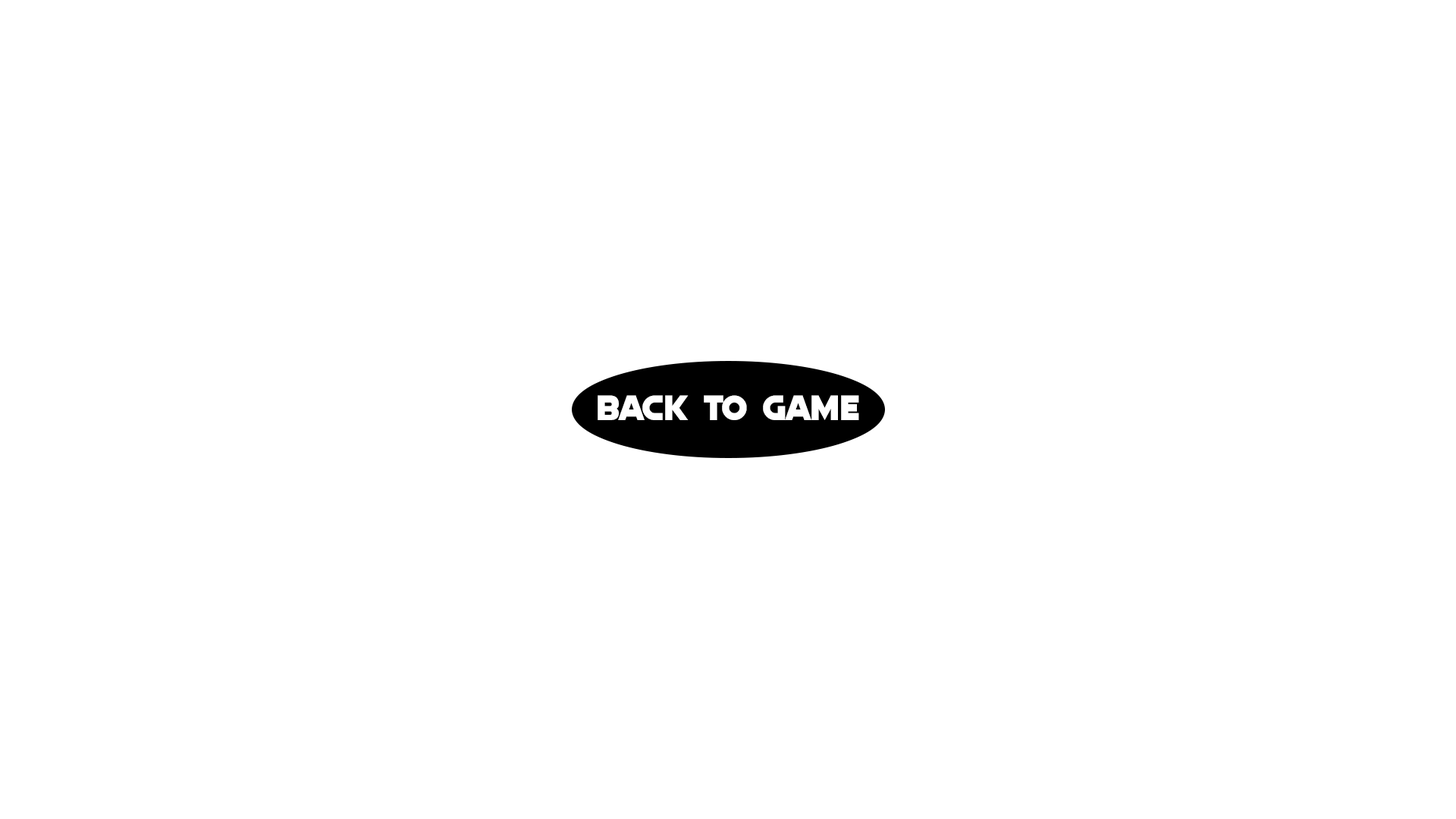
<style>
.page{position:relative;width:1456px;height:819px;background:#ffffff}
.page>*{position:absolute;margin:0}
.t1{font:36px "Quicksilver";color:#ffffff}
</style>
<div class="page">
<p class="t1" style="left:598px;top:395px;width:261px;height:25px">Back to Game</p>
</div>
